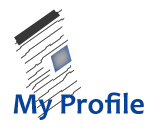
<style>
.page{position:relative;width:160px;height:130px;background:#ffffff}
.page>*{position:absolute;margin:0}
.t1{font:30px "Candara-Bold";color:#084298}
</style>
<div class="page">
<p class="t1" style="left:13px;top:92px;width:131px;height:28px">My Profile</p>
</div>
